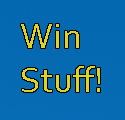
<style>
.page{position:relative;width:125px;height:120px}
.page>*{position:absolute;margin:0}
.t1{font:37px "Corbel";color:#ded321}
</style>
<div class="page">
<p class="t1" style="left:21px;top:24px;width:79px;height:68px">Win<br>Stuff!</p>
</div>
